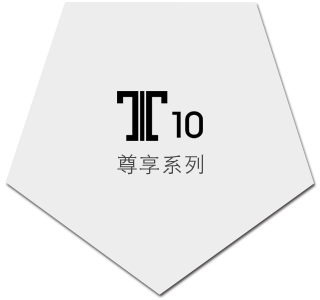
<style>
.page{position:relative;width:320px;height:300px;background:#ededed}
.page>*{position:absolute;margin:0}
.t1{font:21.3px "STXihei";letter-spacing:0.05em;color:#484848}
</style>
<div class="page">
<p class="t1" style="left:117px;top:154px;width:87px;height:21px">尊享系列</p>
</div>
